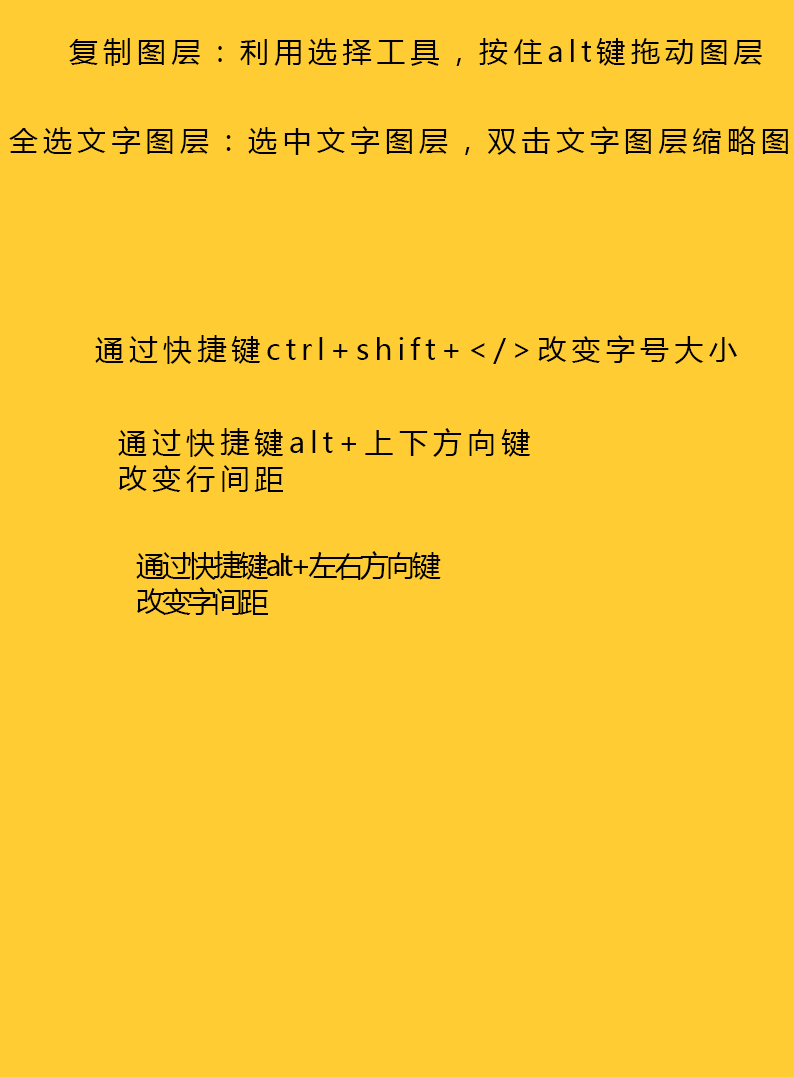
<style>
.page{position:relative;width:794px;height:1077px;background:#ffcc33}
.page>*{position:absolute;margin:0}
.t1{font:29.5px "MicrosoftYaHei";letter-spacing:0.16em;color:#000000}
.t2{font:29.5px/36.5px "MicrosoftYaHei";letter-spacing:0.16em;color:#000000}
.t3{font:29.5px/36.5px "MicrosoftYaHei";letter-spacing:-0.12em;color:#000000}
</style>
<div class="page">
<p class="t1" style="left:69px;top:38px;width:693px;height:28px">复制图层：利用选择工具，按住alt键拖动图层</p>
<p class="t1" style="left:95px;top:335px;width:642px;height:29px">通过快捷键ctrl+shift+&lt;/&gt;改变字号大小</p>
<p class="t2" style="left:118px;top:428px;width:412px;height:64px;text-align:justify">通过快捷键alt+上下方向键<br>改变行间距</p>
<p class="t3" style="left:136px;top:551px;width:305px;height:64px;text-align:justify">通过快捷键alt+左右方向键<br>改变字间距</p>
</div>
